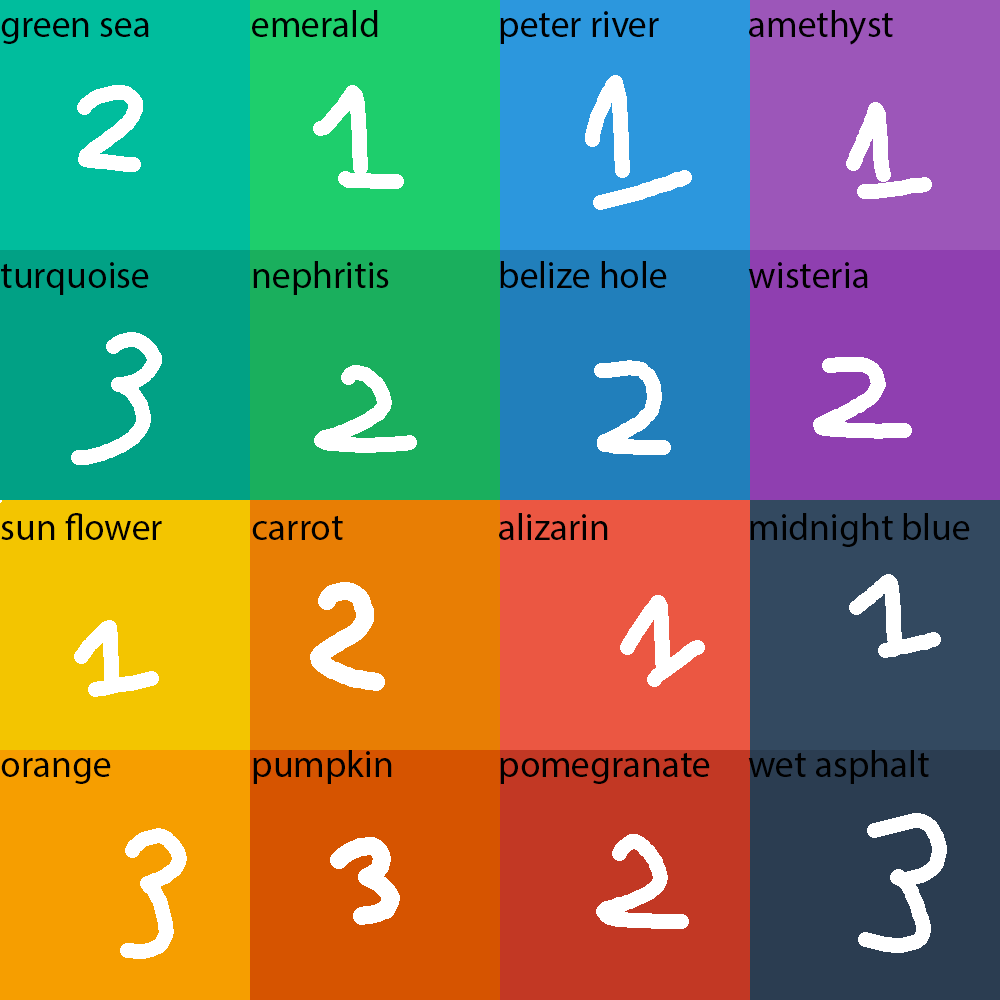
<style>
.page{position:relative;width:1000px;height:1000px}
.page>*{position:absolute;margin:0}
.t1{font:37.5px "MyriadPro-Regular";color:#000000}
</style>
<div class="page">
<p class="t1" style="left:252px;top:10px;width:126px;height:27px">emerald</p>
<p class="t1" style="left:500px;top:11px;width:159px;height:33px">peter river</p>
<p class="t1" style="left:749px;top:10px;width:144px;height:35px">amethyst</p>
<p class="t1" style="left:1px;top:18px;width:148px;height:26px">green sea</p>
<p class="t1" style="left:1px;top:262px;width:148px;height:33px">turquoise</p>
<p class="t1" style="left:253px;top:261px;width:136px;height:34px">nephritis</p>
<p class="t1" style="left:500px;top:261px;width:167px;height:27px">belize hole</p>
<p class="t1" style="left:748px;top:262px;width:120px;height:26px">wisteria</p>
<p class="t1" style="left:1px;top:513px;width:161px;height:27px">sun flower</p>
<p class="t1" style="left:252px;top:515px;width:91px;height:25px">carrot</p>
<p class="t1" style="left:499px;top:513px;width:109px;height:27px">alizarin</p>
<p class="t1" style="left:750px;top:513px;width:220px;height:34px">midnight blue</p>
<p class="t1" style="left:253px;top:750px;width:139px;height:34px">pumpkin</p>
<p class="t1" style="left:748px;top:750px;width:181px;height:34px">wet asphalt</p>
<p class="t1" style="left:1px;top:758px;width:110px;height:26px">orange</p>
<p class="t1" style="left:500px;top:752px;width:210px;height:32px">pomegranate</p>
</div>
